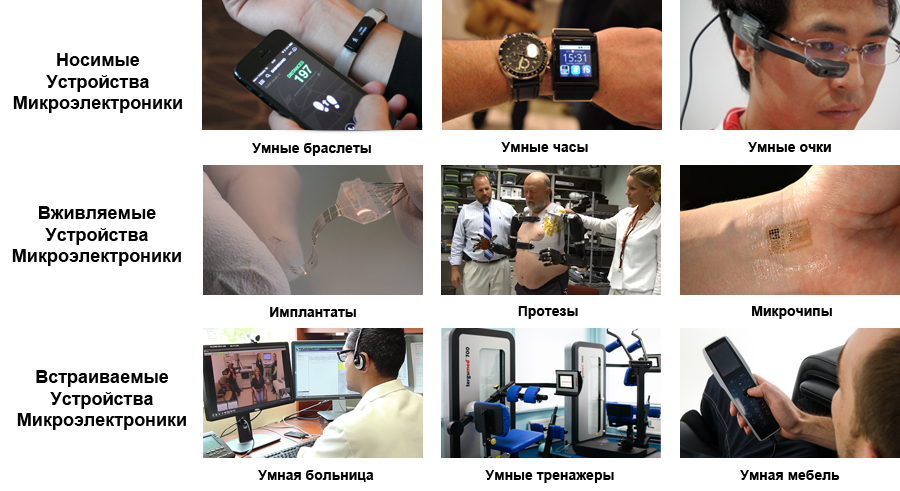
<style>
.page{position:relative;width:900px;height:491px;background:#ffffff}
.page>*{position:absolute;margin:0}
.t1{font:18px "Arial-BoldMT";color:#000000}
.t2{font:14px "Arial-BoldMT";color:#000000}
</style>
<div class="page">
<p class="t1" style="left:13px;top:53px;width:169px;height:60px;text-align:center">Носимые<br>Устройства<br>Микроэлектроники</p>
<p class="t2" style="left:252px;top:143px;width:119px;height:13px">Умные браслеты</p>
<p class="t2" style="left:501px;top:142px;width:87px;height:10px">Умные часы</p>
<p class="t2" style="left:748px;top:142px;width:83px;height:10px">Умные очки</p>
<p class="t1" style="left:12px;top:206px;width:169px;height:60px;text-align:center">Вживляемые<br>Устройства<br>Микроэлектроники</p>
<p class="t2" style="left:270px;top:307px;width:86px;height:10px">Имплантаты</p>
<p class="t2" style="left:518px;top:306px;width:60px;height:13px">Протезы</p>
<p class="t2" style="left:752px;top:306px;width:80px;height:13px">Микрочипы</p>
<p class="t1" style="left:17px;top:370px;width:169px;height:60px;text-align:center">Встраиваемые<br>Устройства<br>Микроэлектроники</p>
<p class="t2" style="left:258px;top:470px;width:116px;height:12px">Умная больница</p>
<p class="t2" style="left:485px;top:470px;width:129px;height:13px">Умные тренажеры</p>
<p class="t2" style="left:740px;top:470px;width:100px;height:10px">Умная мебель</p>
</div>
